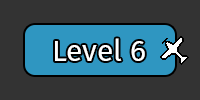
<style>
.page{position:relative;width:200px;height:100px;background:#333333}
.page>*{position:absolute;margin:0}
.t1{font:30px "FiraSans-Regular";color:#ffffff}
</style>
<div class="page">
<p class="t1" style="left:55px;top:38px;width:90px;height:23px">Level 6</p>
</div>
